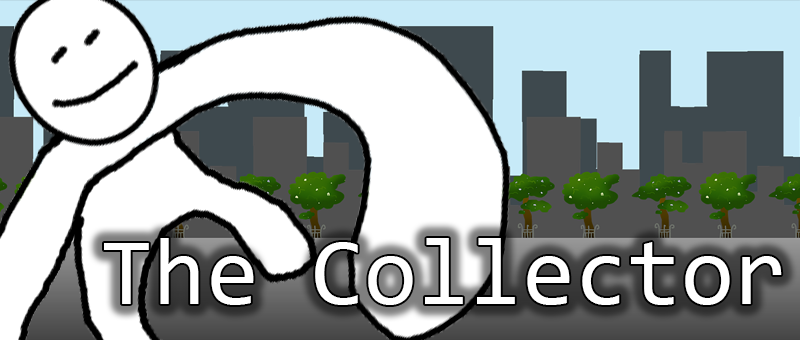
<style>
.page{position:relative;width:800px;height:340px;background:#ffffff}
.page>*{position:absolute;margin:0}
.t1{font:96px "Consolas";color:#ffffff}
</style>
<div class="page">
<p class="t1" style="left:104px;top:238px;width:678px;height:67px">The Collector</p>
</div>
